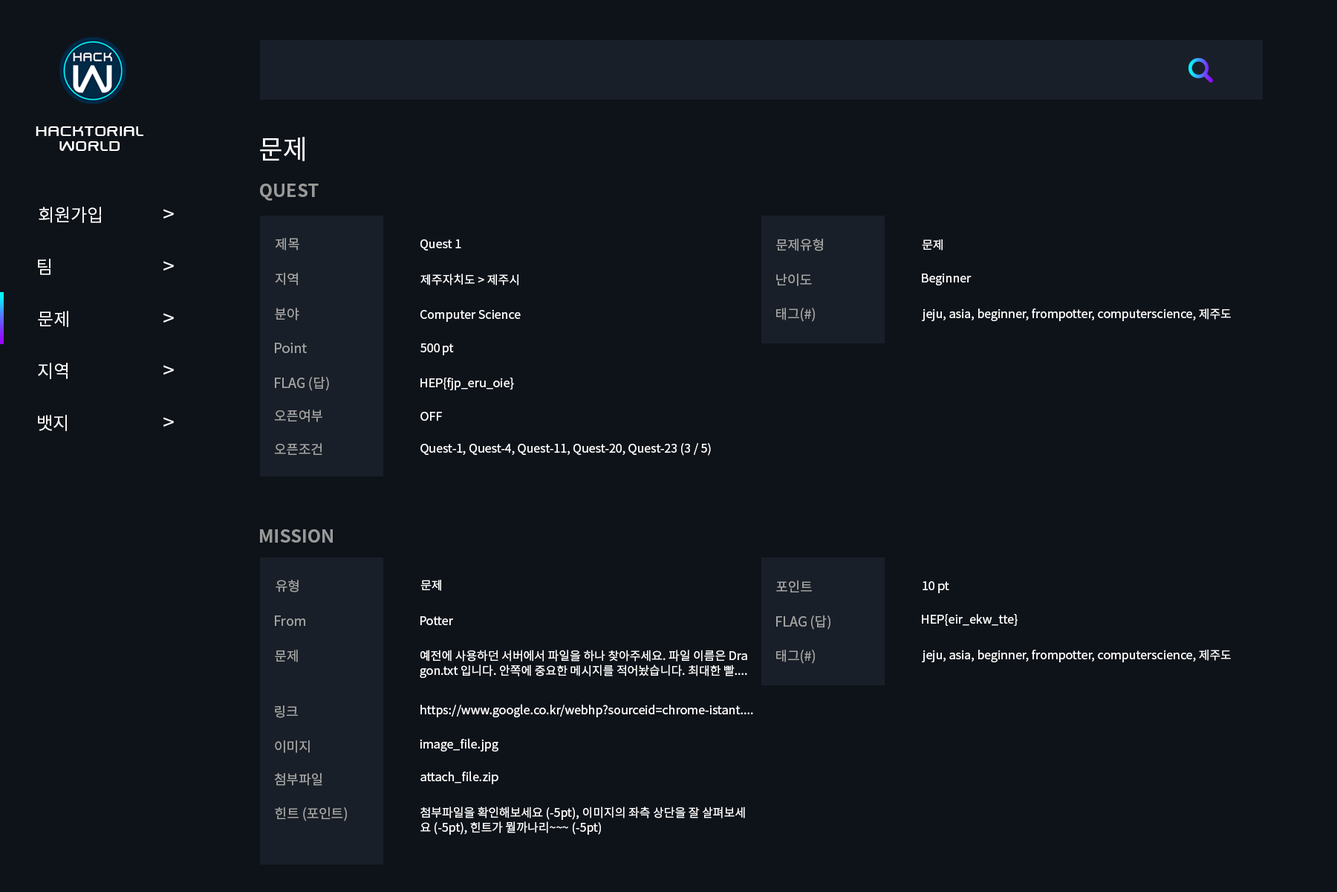
<style>
.page{position:relative;width:1337px;height:892px;background:#0e131a}
.page>*{position:absolute;margin:0}
.t1{font:17.8px/14.9px "SwiszRegular";color:#ffffff}
.t2{font:26.7px "NotoSansCJKkr-Regular";color:#ffffff}
.t3{font:17.8px "NotoSansCJKkr-Bold";color:#999999}
.t4{font:17.8px "NotoSansCJKkr-Regular";color:#ffffff}
.t5{font:20.8px "NotoSansCJKkr-Regular";color:#ffffff}
.t6{font:13.4px "NotoSansCJKkr-Regular";color:#a3a3a3}
.t7{font:11.9px "NotoSansCJKkr-Regular";color:#ffffff}
.t8{font:11.9px/14.9px "NotoSansCJKkr-Regular";color:#ffffff}
</style>
<div class="page">
<p class="t1" style="left:36px;top:126px;width:107px;height:25px;text-align:center">hacktorial<br>world</p>
<p class="t2" style="left:260px;top:137px;width:45px;height:24px">문제</p>
<p class="t3" style="left:260px;top:184px;width:59px;height:17px">QUEST</p>
<p class="t4" style="left:39px;top:207px;width:62px;height:16px">회원가입</p>
<p class="t5" style="left:163px;top:209px;width:11px;height:9px">&gt;</p>
<p class="t6" style="left:276px;top:238px;width:23px;height:12px">제목</p>
<p class="t7" style="left:421px;top:239px;width:40px;height:11px">Quest 1</p>
<p class="t6" style="left:776px;top:239px;width:47px;height:12px">문제유형</p>
<p class="t7" style="left:922px;top:239px;width:21px;height:11px">문제</p>
<p class="t4" style="left:38px;top:259px;width:13px;height:16px">팀</p>
<p class="t5" style="left:163px;top:261px;width:11px;height:9px">&gt;</p>
<p class="t6" style="left:275px;top:273px;width:23px;height:12px">지역</p>
<p class="t7" style="left:421px;top:273px;width:98px;height:12px">제주자치도 &gt; 제주시</p>
<p class="t6" style="left:776px;top:273px;width:36px;height:13px">난이도</p>
<p class="t7" style="left:922px;top:273px;width:50px;height:12px">Beginner</p>
<p class="t4" style="left:38px;top:311px;width:30px;height:16px">문제</p>
<p class="t5" style="left:163px;top:313px;width:11px;height:9px">&gt;</p>
<p class="t6" style="left:275px;top:308px;width:24px;height:12px">분야</p>
<p class="t7" style="left:421px;top:309px;width:100px;height:13px">Computer Science</p>
<p class="t6" style="left:776px;top:308px;width:39px;height:14px">태그(#)</p>
<p class="t7" style="left:922px;top:308px;width:309px;height:13px">jeju, asia, beginner, frompotter, computerscience, 제주도</p>
<p class="t6" style="left:275px;top:343px;width:32px;height:10px">Point</p>
<p class="t7" style="left:421px;top:343px;width:19px;height:9px">500</p>
<p class="t7" style="left:443px;top:343px;width:11px;height:12px">pt</p>
<p class="t4" style="left:38px;top:363px;width:30px;height:16px">지역</p>
<p class="t5" style="left:163px;top:365px;width:11px;height:9px">&gt;</p>
<p class="t6" style="left:275px;top:376px;width:54px;height:15px">FLAG (답)</p>
<p class="t7" style="left:421px;top:377px;width:93px;height:13px">HEP{fjp_eru_oie}</p>
<p class="t6" style="left:274px;top:409px;width:48px;height:13px">오픈여부</p>
<p class="t7" style="left:421px;top:412px;width:21px;height:9px">OFF</p>
<p class="t4" style="left:38px;top:415px;width:29px;height:16px">뱃지</p>
<p class="t5" style="left:163px;top:417px;width:11px;height:9px">&gt;</p>
<p class="t6" style="left:274px;top:443px;width:48px;height:12px">오픈조건</p>
<p class="t7" style="left:421px;top:443px;width:290px;height:12px">Quest-1, Quest-4, Quest-11, Quest-20, Quest-23 (3 / 5)</p>
<p class="t3" style="left:260px;top:529px;width:73px;height:13px">MISSION</p>
<p class="t6" style="left:276px;top:580px;width:23px;height:12px">유형</p>
<p class="t7" style="left:421px;top:580px;width:20px;height:11px">문제</p>
<p class="t6" style="left:776px;top:580px;width:36px;height:12px">포인트</p>
<p class="t7" style="left:923px;top:581px;width:27px;height:12px">10 pt</p>
<p class="t6" style="left:275px;top:615px;width:30px;height:11px">From</p>
<p class="t7" style="left:421px;top:616px;width:32px;height:9px">Potter</p>
<p class="t6" style="left:776px;top:614px;width:55px;height:15px">FLAG (답)</p>
<p class="t7" style="left:922px;top:614px;width:96px;height:12px">HEP{eir_ekw_tte}</p>
<p class="t6" style="left:275px;top:649px;width:23px;height:13px">문제</p>
<p class="t8" style="left:420px;top:649px;width:327px;height:29px">예전에 사용하던 서버에서 파일을 하나 찾아주세요. 파일 이름은 Dra<br>gon.txt 입니다. 안쪽에 중요한 메시지를 적어놨습니다. 최대한 빨....</p>
<p class="t6" style="left:776px;top:649px;width:39px;height:15px">태그(#)</p>
<p class="t7" style="left:922px;top:649px;width:309px;height:13px">jeju, asia, beginner, frompotter, computerscience, 제주도</p>
<p class="t6" style="left:275px;top:705px;width:23px;height:13px">링크</p>
<p class="t7" style="left:421px;top:704px;width:332px;height:13px">https://www.google.co.kr/webhp?sourceid=chrome-istant....</p>
<p class="t7" style="left:420px;top:738px;width:79px;height:13px">image_file.jpg</p>
<p class="t6" style="left:275px;top:740px;width:35px;height:13px">이미지</p>
<p class="t6" style="left:274px;top:773px;width:48px;height:12px">첨부파일</p>
<p class="t7" style="left:421px;top:770px;width:78px;height:14px">attach_file.zip</p>
<p class="t6" style="left:275px;top:806px;width:72px;height:15px">힌트 (포인트)</p>
<p class="t8" style="left:421px;top:806px;width:324px;height:28px">첨부파일을 확인해보세요 (-5pt), 이미지의 좌측 상단을 잘 살펴보세<br>요 (-5pt), 힌트가 뭘까나리~~~ (-5pt)</p>
</div>
